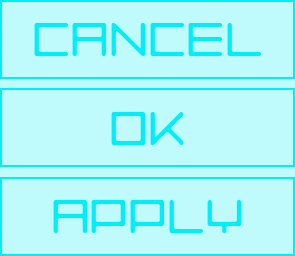
<style>
.page{position:relative;width:295px;height:256px;background:#bffbfd}
.page>*{position:absolute;margin:0}
.t1{font:60px "LuggageRoundLight";color:#00eef7}
</style>
<div class="page">
<p class="t1" style="left:34px;top:23px;width:227px;height:33px">CANCEL</p>
<p class="t1" style="left:111px;top:112px;width:73px;height:33px">ok</p>
<p class="t1" style="left:53px;top:200px;width:188px;height:33px">APPLY</p>
</div>
